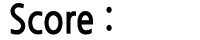
<style>
.page{position:relative;width:200px;height:40px;background:#ffffff}
.page>*{position:absolute;margin:0}
.t1{font:39.7px "NanumGothicBold";color:#000000;scale:0.85 1}
</style>
<div class="page">
<p class="t1" style="left:10px;top:3px;width:102px;height:32px">Score :</p>
</div>
